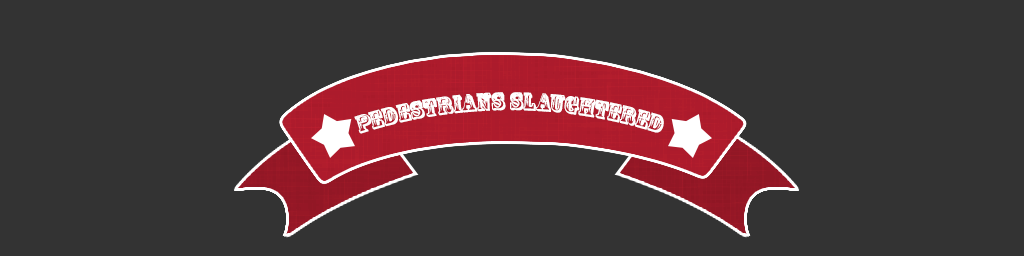
<style>
.page{position:relative;width:1024px;height:256px;background:#333333}
.page>*{position:absolute;margin:0}
.t1{font:24px "RosewoodStd-Regular";color:#ffffff}
</style>
<div class="page">
<p class="t1" style="left:354px;top:92px;width:310px;height:42px">Pedestrians Slaughtered</p>
</div>
